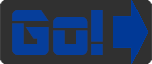
<style>
.page{position:relative;width:152px;height:64px;background:#303030}
.page>*{position:absolute;margin:0}
.t1{font:72px "ARDESTINE";color:#063e9b}
</style>
<div class="page">
<p class="t1" style="left:12px;top:10px;width:91px;height:45px">Go!</p>
</div>
